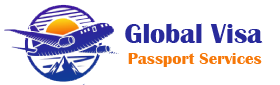
<style>
.page{position:relative;width:280px;height:85px;background:#ffffff}
.page>*{position:absolute;margin:0}
.t1{font:28px "BritannicBold";color:#282a9b}
.t2{font:17px "BritannicBold";color:#f67809}
</style>
<div class="page">
<p class="t1" style="left:125px;top:23px;width:138px;height:20px">Global Visa</p>
<p class="t2" style="left:128px;top:53px;width:134px;height:14px">Passport Services</p>
</div>
